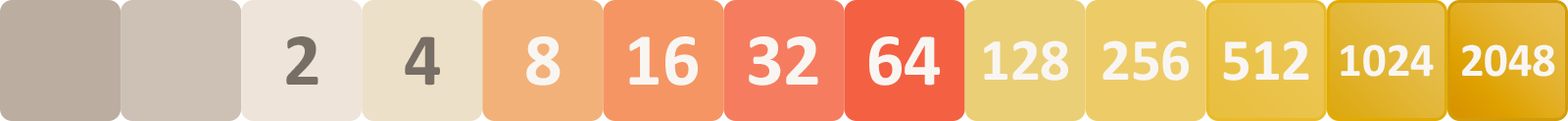
<style>
.page{position:relative;width:1568px;height:121px}
.page>*{position:absolute;margin:0}
.t1{font:74.7px "Calibri-Bold";color:#776e65}
.t2{font:74.7px "Calibri-Bold";color:#f9f6f2}
.t3{font:59.8px "Calibri-Bold";color:#f9f6f2}
.t4{font:47.8px "Calibri-Bold";color:#f9f6f2}
</style>
<div class="page">
<p class="t1" style="left:286px;top:36px;width:32px;height:48px">2</p>
<p class="t1" style="left:405px;top:36px;width:35px;height:49px">4</p>
<p class="t2" style="left:526px;top:36px;width:35px;height:49px">8</p>
<p class="t2" style="left:629px;top:36px;width:69px;height:49px">16</p>
<p class="t2" style="left:749px;top:36px;width:69px;height:49px">32</p>
<p class="t2" style="left:869px;top:36px;width:71px;height:49px">64</p>
<p class="t3" style="left:984px;top:40px;width:84px;height:40px">128</p>
<p class="t3" style="left:1102px;top:40px;width:87px;height:40px">256</p>
<p class="t3" style="left:1223px;top:40px;width:86px;height:40px">512</p>
<p class="t4" style="left:1341px;top:44px;width:93px;height:32px">1024</p>
<p class="t4" style="left:1462px;top:44px;width:93px;height:32px">2048</p>
</div>
